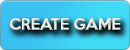
<style>
.page{position:relative;width:130px;height:50px}
.page>*{position:absolute;margin:0}
.t1{font:14.3px "KeepCalm-Medium"}
</style>
<div class="page">
<p class="t1" style="left:10px;top:18px;width:111px;height:13px">CREATE GAME</p>
</div>
